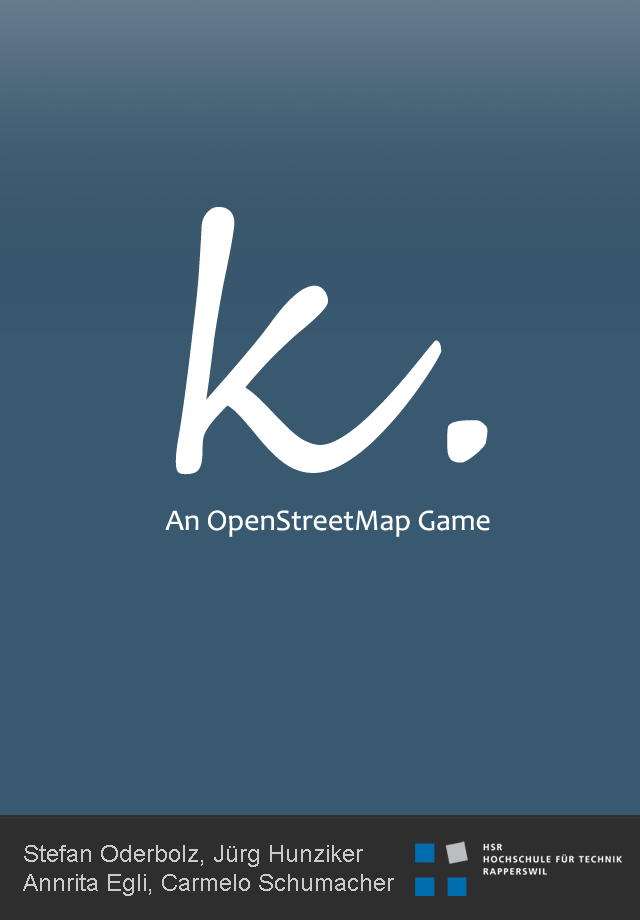
<style>
.page{position:relative;width:640px;height:920px;background:#395971}
.page>*{position:absolute;margin:0}
.t1{font:346.8px "SegoeScript";color:#ffffff}
.t2{font:30px "Candara";color:#ffffff}
.t3{font:24px "ArialMT";color:#cacaca}
</style>
<div class="page">
<p class="t1" style="left:175px;top:207px;width:313px;height:268px">k.</p>
<p class="t2" style="left:165px;top:510px;width:325px;height:27px">An OpenStreetMap Game</p>
<p class="t3" style="left:23px;top:845px;width:371px;height:51px">Stefan Oderbolz, Jürg Hunziker<br>Annrita Egli, Carmelo Schumacher</p>
</div>
